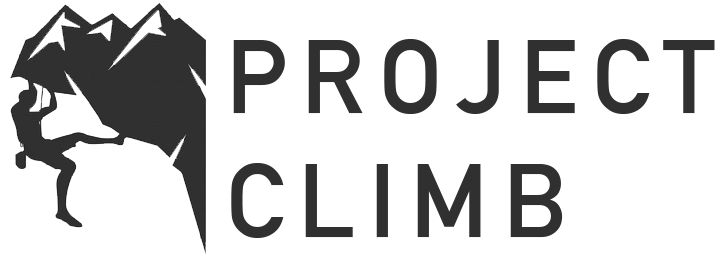
<style>
.page{position:relative;width:720px;height:256px;background:#ffffff}
.page>*{position:absolute;margin:0}
.t1{font:103px "AlteDIN1451Mittelschrift";letter-spacing:0.14em;color:#303030}
</style>
<div class="page">
<p class="t1" style="left:231px;top:39px;width:484px;height:199px">PROJECT<br>CLIMB</p>
</div>
